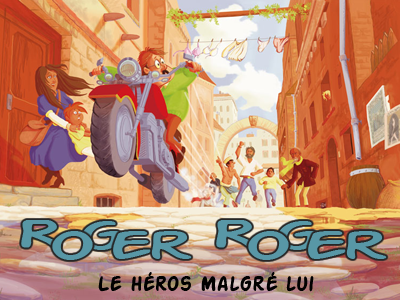
<style>
.page{position:relative;width:400px;height:300px}
.page>*{position:absolute;margin:0}
.t1{font:43.8px "ActionManExtended";color:#5897a6}
.t2{font:21.9px "ActionMan-Bold";color:#010101}
</style>
<div class="page">
<p class="t1" style="left:21px;top:220px;width:41px;height:28px">R</p>
<p class="t1" style="left:82px;top:221px;width:40px;height:29px">g</p>
<p class="t1" style="left:216px;top:220px;width:41px;height:28px">R</p>
<p class="t1" style="left:278px;top:221px;width:40px;height:29px">g</p>
<p class="t1" style="left:52px;top:231px;width:41px;height:29px">o</p>
<p class="t1" style="left:113px;top:231px;width:40px;height:28px">e</p>
<p class="t1" style="left:151px;top:231px;width:41px;height:28px">r</p>
<p class="t1" style="left:248px;top:231px;width:41px;height:29px">o</p>
<p class="t1" style="left:308px;top:231px;width:40px;height:28px">e</p>
<p class="t1" style="left:346px;top:231px;width:41px;height:28px">r</p>
<p class="t2" style="left:98px;top:272px;width:216px;height:20px">Le héros Malgré lui</p>
</div>
